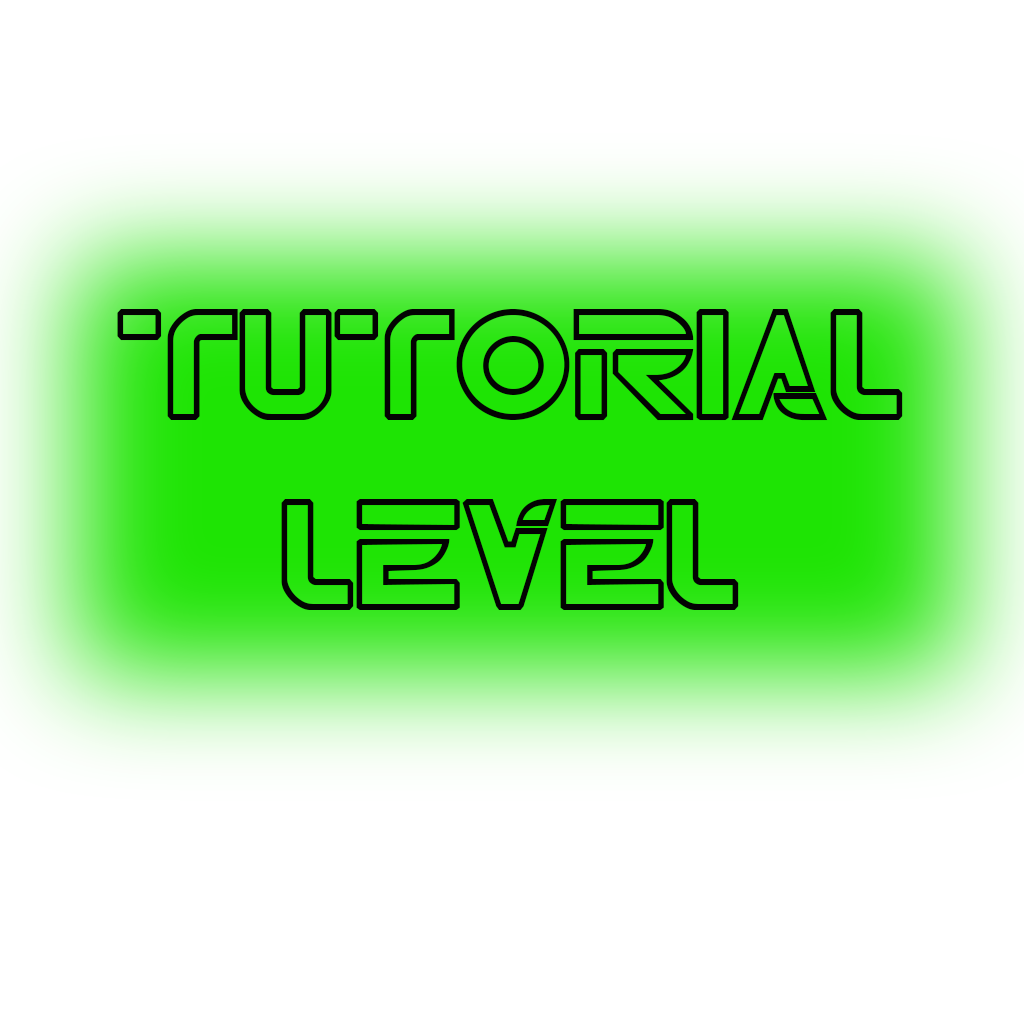
<style>
.page{position:relative;width:1024px;height:1024px;background:#ffffff}
.page>*{position:absolute;margin:0}
.t1{font:158.4px "TRN";color:#030303}
</style>
<div class="page">
<p class="t1" style="left:117px;top:309px;width:786px;height:301px;text-align:center">tutorial<br>Level</p>
</div>
